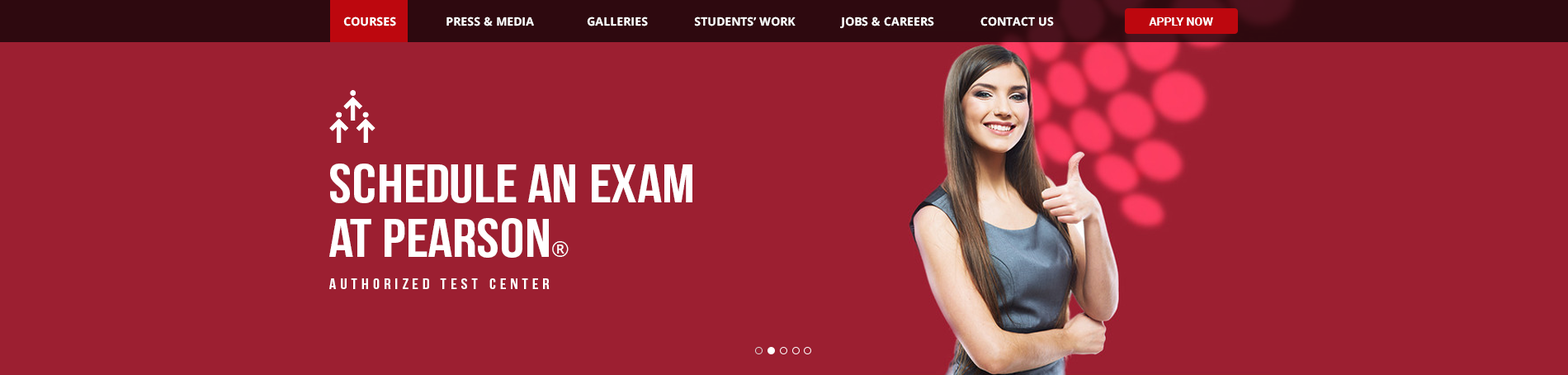
<style>
.page{position:relative;width:1568px;height:375px;background:#9c1f31}
.page>*{position:absolute;margin:0}
.t1{font:11.6px "OpenSans-Bold";color:#ffffff}
.t2{font:11.6px "Roboto-Bold";color:#ffffff}
.t3{font:11.6px "OpenSans-Bold";color:#b1b1b1}
.t4{font:53.7px/54.5px "BebasNeue";color:#ffffff;text-transform:uppercase;scale:1.14 1}
.t5{font:21.5px/54.5px "OpenSans";color:#ffffff}
.t6{font:15px "BebasNeue";letter-spacing:0.246em;color:#ffffff;scale:1.14 1}
</style>
<div class="page">
<p class="t1" style="left:343px;top:17px;width:711px;height:12px">COURSES               PRESS &amp; MEDIA                GALLERIES              STUDENTS’ WORK              JOBS &amp; CAREERS              CONTACT US</p>
<p class="t2" style="left:1149px;top:17px;width:64px;height:9px"><span class="t3"> </span>APPLY NOW</p>
<p class="t4" style="left:329px;top:163px;width:363px;height:94px">Schedule an exam<br>at Pearson<span class="t5">®</span></p>
<p class="t6" style="left:329px;top:278px;width:221px;height:11px">Authorized Test Center</p>
</div>
